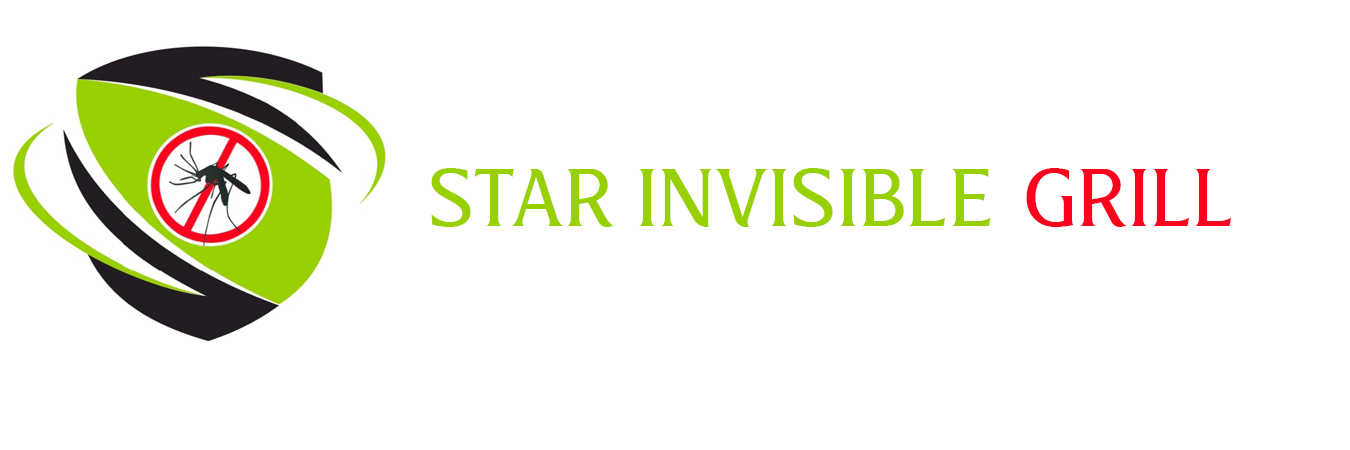
<style>
.page{position:relative;width:1350px;height:450px;background:#ffffff}
.page>*{position:absolute;margin:0}
.t1{font:80px "Revans-Normal";color:#99d001}
.t2{font:80px "Revans-Normal";color:#ff001f}
</style>
<div class="page">
<p class="t1" style="left:431px;top:168px;width:560px;height:59px">STAR INVISIBLE</p>
<p class="t2" style="left:1026px;top:168px;width:206px;height:59px">GRILL</p>
</div>
